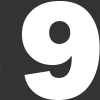
<style>
.page{position:relative;width:100px;height:100px;background:#ffffff}
.page>*{position:absolute;margin:0}
.t1{font:145.8px "FranklinGothic-Heavy";color:#ffffff}
</style>
<div class="page">
<p class="t1" style="left:21px;top:1px;width:79px;height:99px">9</p>
</div>
